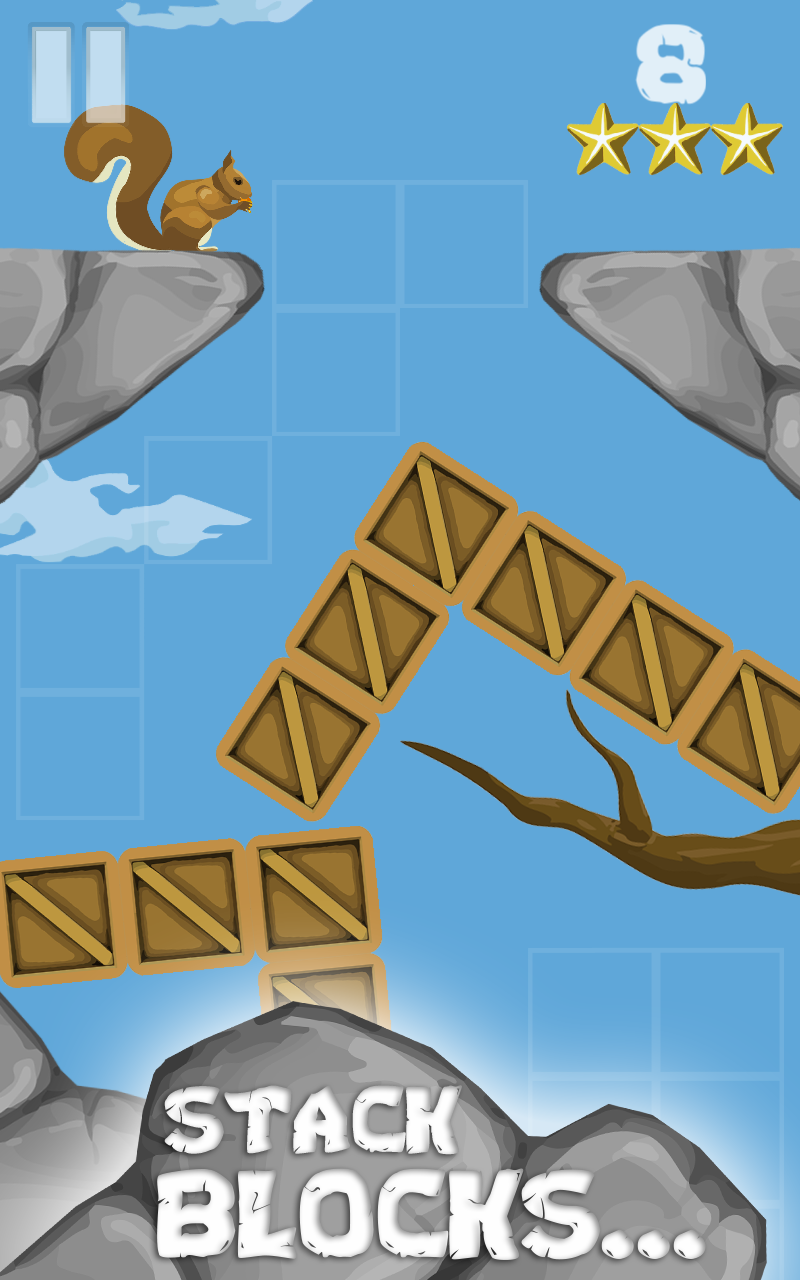
<style>
.page{position:relative;width:800px;height:1280px;background:#5fa7d9}
.page>*{position:absolute;margin:0}
.t1{font:92px "Turtles";color:#fefefe}
.t2{font:122px "Turtles";color:#fefefe}
</style>
<div class="page">
<p class="t1" style="left:164px;top:1085px;width:298px;height:70px">STACK</p>
<p class="t2" style="left:157px;top:1168px;width:549px;height:92px">BLOCKS...</p>
</div>
